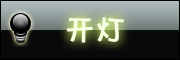
<style>
.page{position:relative;width:180px;height:60px;background:#0a0809}
.page>*{position:absolute;margin:0}
.t1{font:30px "FZKATJW--GB1-0";color:#f8ffe1;font-weight:bold}
</style>
<div class="page">
<p class="t1" style="left:66px;top:17px;width:58px;height:26px">开灯</p>
</div>
